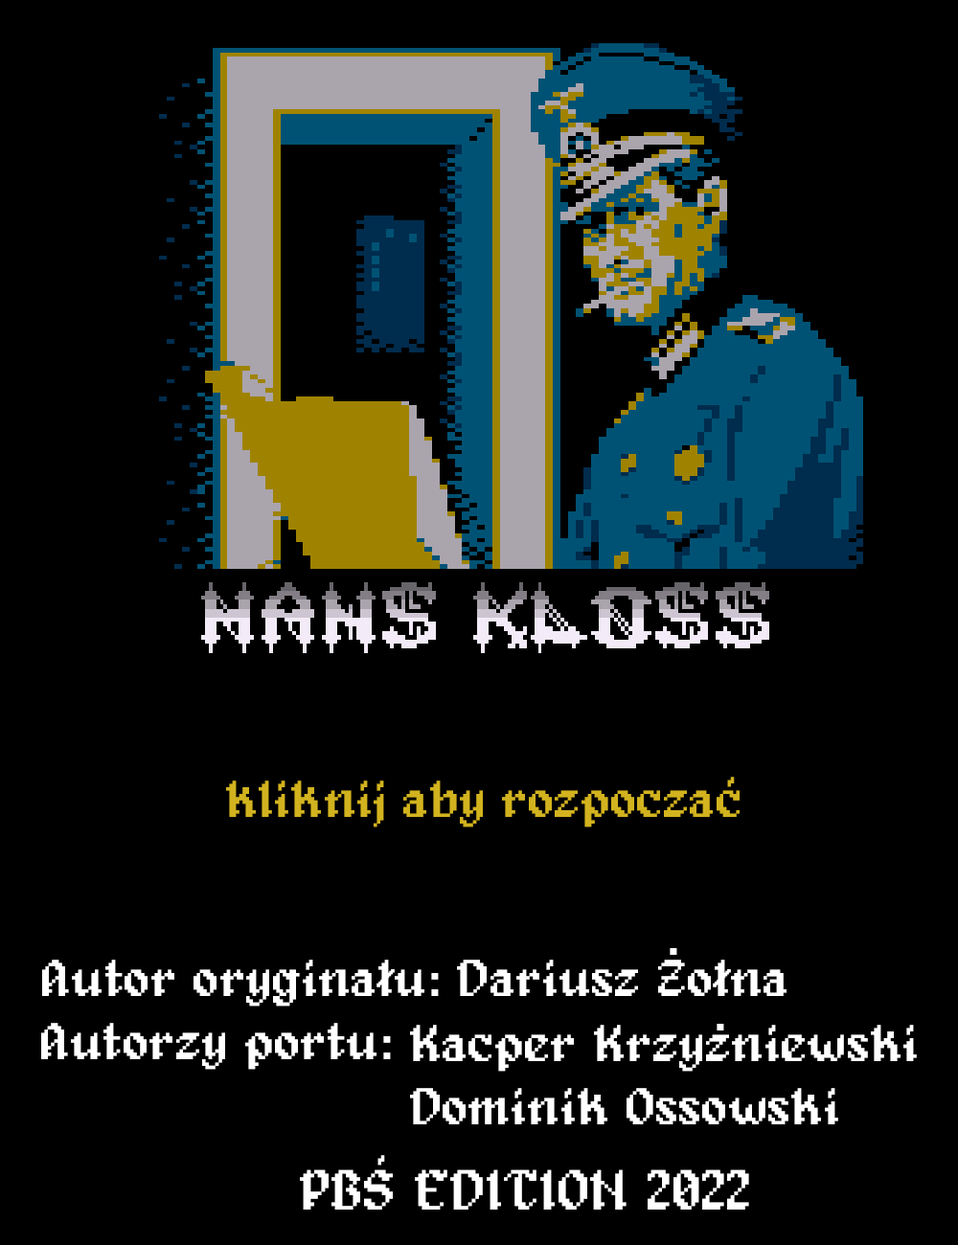
<style>
.page{position:relative;width:958px;height:1245px;background:#000000}
.page>*{position:absolute;margin:0}
.t1{font:52.7px "Alagard";color:#d2b31f}
.t2{font:52.7px "Alagard";color:#ffffff}
.t3{font:57.5px "Alagard";color:#ffffff}
</style>
<div class="page">
<p class="t1" style="left:226px;top:781px;width:513px;height:46px">kliknij aby rozpoczac</p>
<p class="t2" style="left:669px;top:948px;width:8px;height:7px">.</p>
<p class="t2" style="left:42px;top:960px;width:744px;height:47px">Autor oryginalu: Dariusz Zolna</p>
<p class="t2" style="left:41px;top:1023px;width:350px;height:47px">Autorzy portu:</p>
<p class="t2" style="left:410px;top:1025px;width:507px;height:99px">Kacper Krzyzniewski<br>Dominik Ossowski</p>
<p class="t2" style="left:716px;top:1024px;width:8px;height:7px">.</p>
<p class="t3" style="left:300px;top:1169px;width:449px;height:41px">PBS EDITION 2022</p>
</div>
